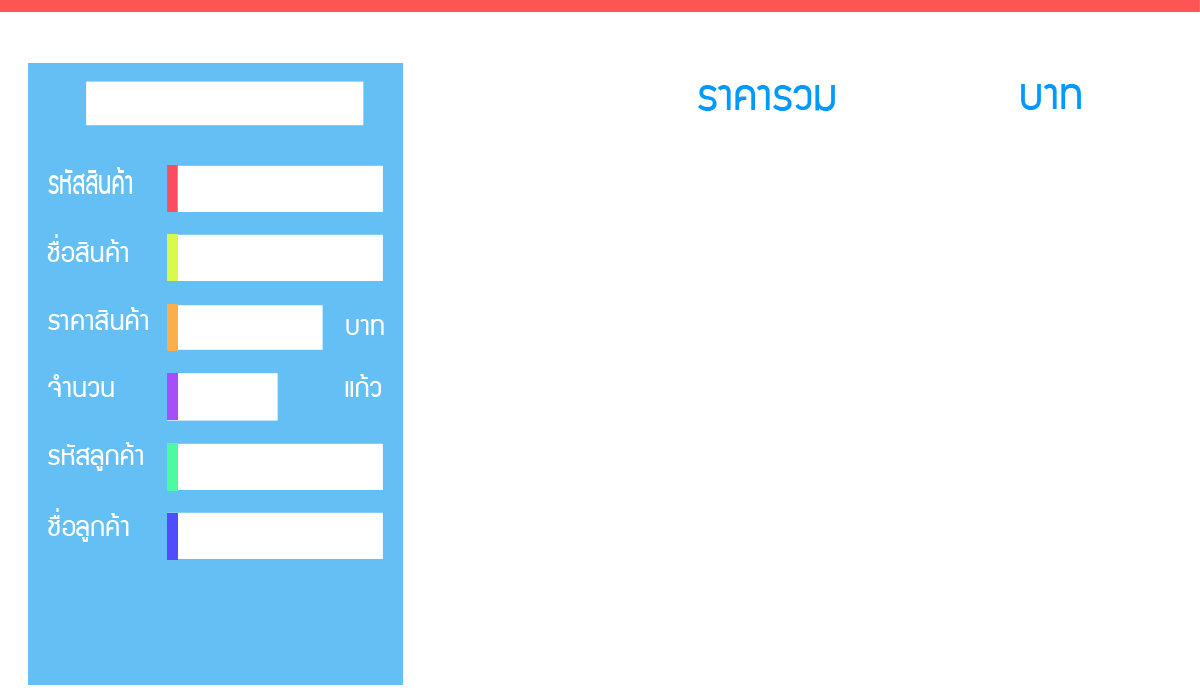
<style>
.page{position:relative;width:1200px;height:700px;background:#ffffff}
.page>*{position:absolute;margin:0}
.t1{font:48px "supermarket";color:#0099ff}
.t2{font:36px "supermarket";color:#ffffff;scale:0.73 1}
.t3{font:30px "supermarket";color:#ffffff}
</style>
<div class="page">
<p class="t1" style="left:698px;top:85px;width:137px;height:26px">ราคารวม</p>
<p class="t1" style="left:1021px;top:84px;width:60px;height:26px">บาท</p>
<p class="t2" style="left:48px;top:167px;width:84px;height:27px">รหัสสินค้า</p>
<p class="t3" style="left:47px;top:234px;width:81px;height:28px">ชื่อสินค้า</p>
<p class="t3" style="left:48px;top:307px;width:100px;height:23px">ราคาสินค้า</p>
<p class="t3" style="left:346px;top:319px;width:38px;height:16px">บาท</p>
<p class="t3" style="left:48px;top:374px;width:66px;height:23px">จำนวน</p>
<p class="t3" style="left:345px;top:374px;width:36px;height:23px">แก้ว</p>
<p class="t3" style="left:48px;top:442px;width:95px;height:29px">รหัสลูกค้า</p>
<p class="t3" style="left:48px;top:508px;width:81px;height:34px">ชื่อลูกค้า</p>
</div>
